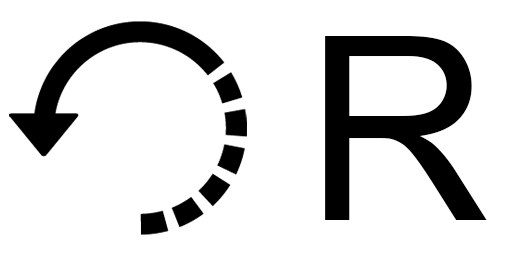
<style>
.page{position:relative;width:512px;height:256px;background:#ffffff}
.page>*{position:absolute;margin:0}
.t1{font:256px "ArialMT";color:#000000}
</style>
<div class="page">
<p class="t1" style="left:325px;top:36px;width:162px;height:184px">R</p>
</div>
